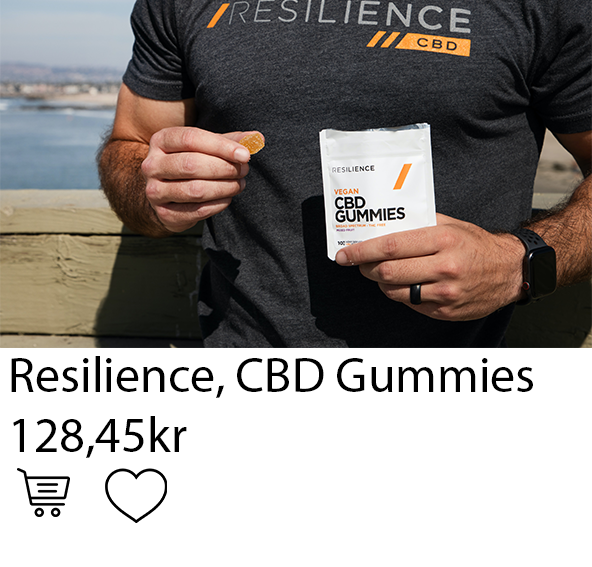
<style>
.page{position:relative;width:592px;height:567px;background:#ffffff}
.page>*{position:absolute;margin:0}
.t1{font:50px "MyriadPro-Regular";color:#000000}
</style>
<div class="page">
<p class="t1" style="left:11px;top:356px;width:522px;height:102px">Resilience, CBD Gummies<br>128,45kr</p>
</div>
